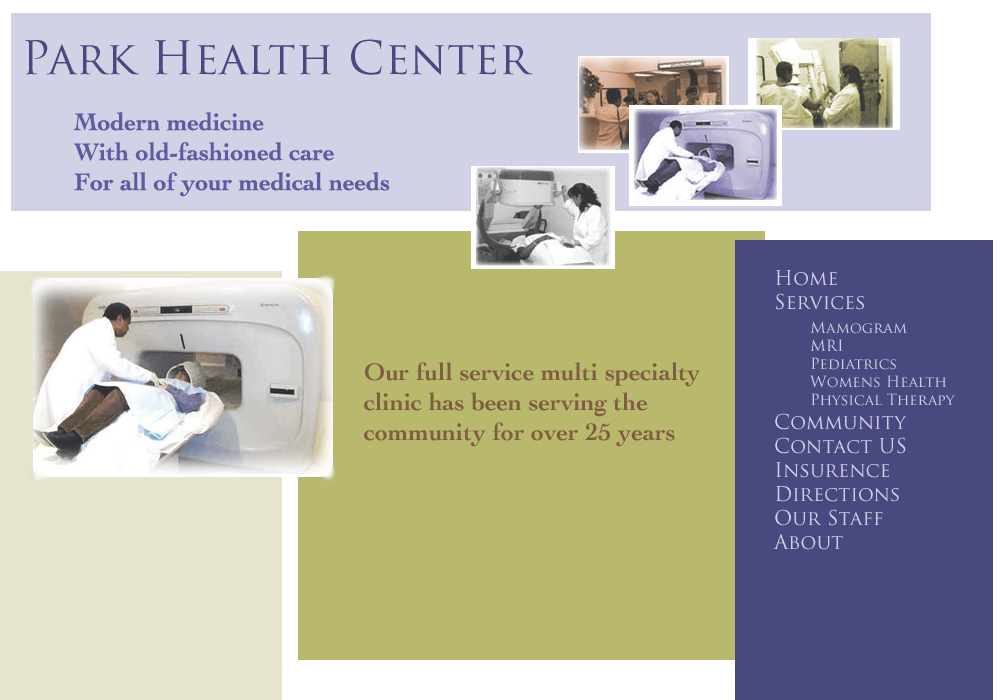
<style>
.page{position:relative;width:1000px;height:700px;background:#b9b96e}
.page>*{position:absolute;margin:0}
.t1{font:45px "TrajanPro-Regular";color:#494980}
.t2{font:25px "Cochin-Bold";color:#5c5ca1}
.t3{font:15px "TrajanPro-Regular";color:#d2d2e6}
.t4{font:20px "TrajanPro-Regular";color:#d2d2e6}
.t5{font:25px "Cochin-Bold";color:#805d40}
</style>
<div class="page">
<p class="t1" style="left:25px;top:39px;width:508px;height:36px">Park Health Center</p>
<p class="t2" style="left:73px;top:112px;width:317px;height:85px">Modern medicine<br>With old-fashioned care<br>For all of your medical needs</p>
<p class="t3" style="left:773px;top:270px;width:182px;height:280px"><span class="t4">Home<br>Services<br> </span>Mamogram<br> MRI<br> Pediatrics<br> Womens Health<br> Physical Therapy<br><span class="t4">Community<br>Contact US<br>Insurence<br>Directions<br>Our Staff<br>About</span></p>
<p class="t5" style="left:364px;top:362px;width:337px;height:85px">Our full service multi specialty <br>clinic has been serving the <br>community for over 25 years</p>
</div>
